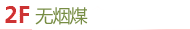
<style>
.page{position:relative;width:190px;height:30px;background:#ffffff}
.page>*{position:absolute;margin:0}
.t1{font:18px "MicrosoftYaHei";color:#778d44}
</style>
<div class="page">
<p class="t1" style="left:35px;top:7px;width:53px;height:18px">无烟煤</p>
</div>
